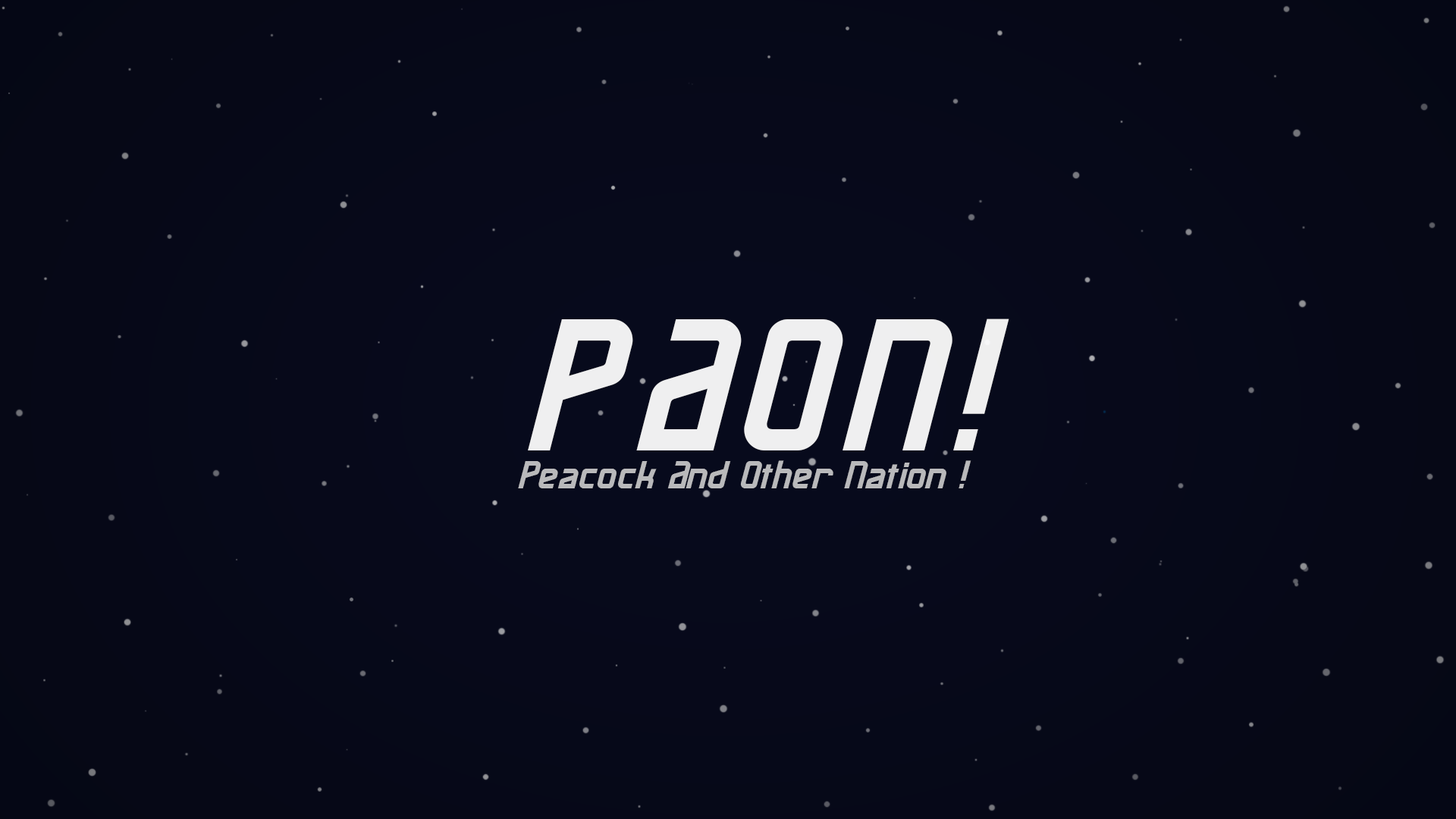
<style>
.page{position:relative;width:1456px;height:819px}
.page>*{position:absolute;margin:0}
.t1{font:151.7px "MaassslicerItalic";letter-spacing:0.1em;color:#ffffff}
.t2{font:32.2px "MaassslicerItalic";color:#b9b9bb}
</style>
<div class="page">
<p class="t1" style="left:528px;top:318px;width:481px;height:132px;opacity:0.9">PAON!</p>
<p class="t2" style="left:518px;top:460px;width:453px;height:28px">Peacock And Other Nation !</p>
</div>
